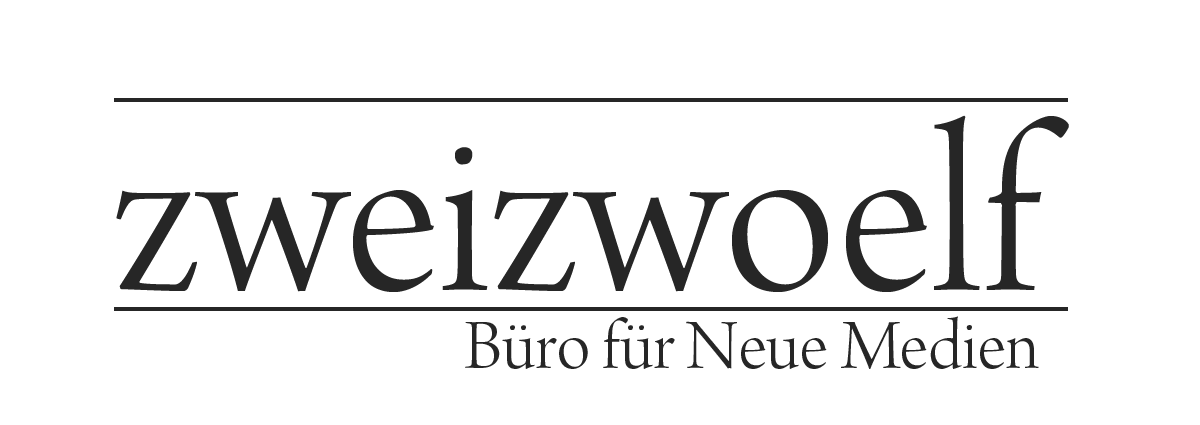
<style>
.page{position:relative;width:1200px;height:425px;background:#ffffff}
.page>*{position:absolute;margin:0}
.t1{font:250px "ArnoPro-LightDisplay";color:#262626}
.t2{font:75px "ArnoPro-LightDisplay";color:#262626}
</style>
<div class="page">
<p class="t1" style="left:116px;top:115px;width:953px;height:177px">zweizwoelf</p>
<p class="t2" style="left:465px;top:316px;width:574px;height:53px">Büro für Neue Medien</p>
</div>
